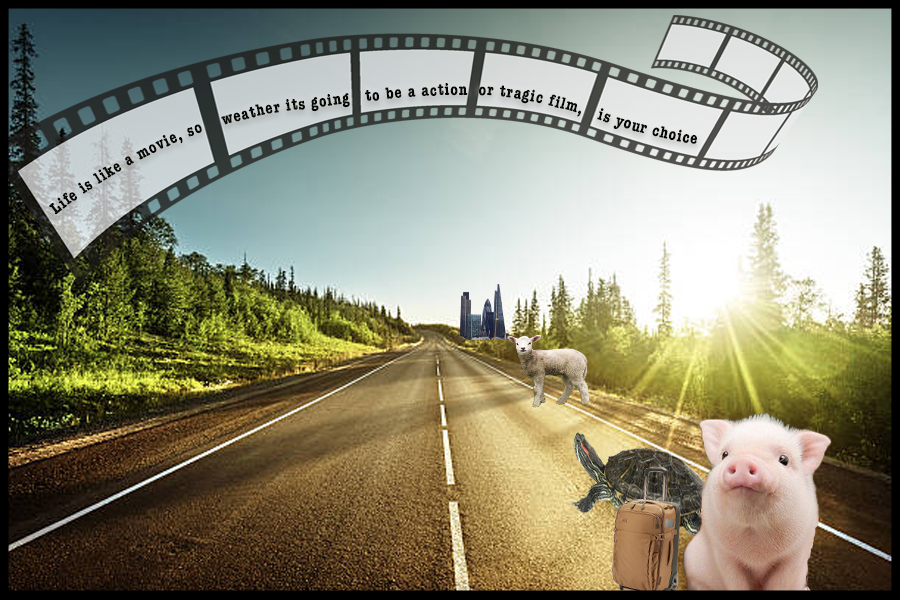
<style>
.page{position:relative;width:900px;height:600px}
.page>*{position:absolute;margin:0}
.t1{font:17px "AmericanTypewriter-CondensedBold";letter-spacing:0.05em;color:#060a03}
.t2{font:17px "BigCaslon-Medium";letter-spacing:0.05em;color:#060a03}
</style>
<div class="page">
<p class="t1" style="left:49px;top:83px;width:648px;height:132px"><span class="t2">    </span>Life is like a movie, so    weather its going   to be a action  or tragic film,   is your choice</p>
</div>
